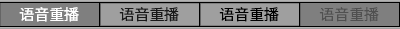
<style>
.page{position:relative;width:400px;height:29px;background:#7f7f7f}
.page>*{position:absolute;margin:0}
.t1{font:15px "SourceHanSansSC-Normal";color:#ffffff}
.t2{font:15px "SourceHanSansSC-Normal";color:#191919}
.t3{font:15px "SourceHanSansSC-Normal";color:#000000}
.t4{font:15px "SourceHanSansSC-Normal";color:#505050}
</style>
<div class="page">
<p class="t1" style="left:19px;top:7px;width:60px;height:15px">语音重播</p>
<p class="t2" style="left:119px;top:7px;width:60px;height:15px">语音重播</p>
<p class="t3" style="left:219px;top:7px;width:60px;height:15px">语音重播</p>
<p class="t4" style="left:319px;top:7px;width:60px;height:15px">语音重播</p>
</div>
